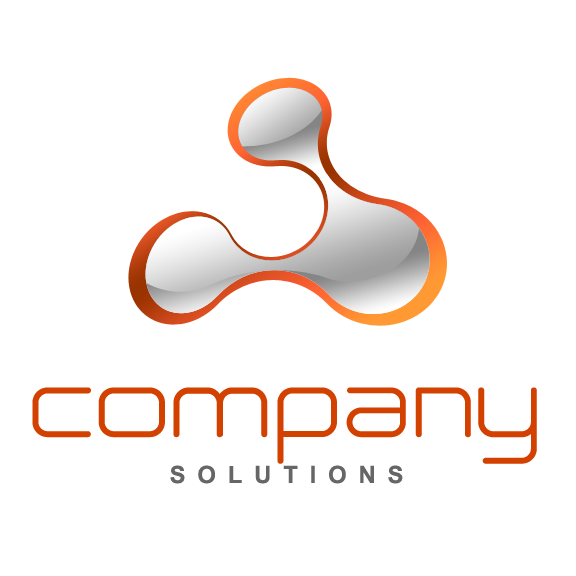
<style>
.page{position:relative;width:576px;height:576px;background:#ffffff}
.page>*{position:absolute;margin:0}
.t1{font:95.1px "Neogrey";letter-spacing:0.02em;color:#d34100}
.t2{font:23.8px "Arial-BoldMT";letter-spacing:0.5em;color:#666666}
</style>
<div class="page">
<p class="t1" style="left:32px;top:387px;width:505px;height:77px">company</p>
<p class="t2" style="left:170px;top:465px;width:233px;height:19px">SOLUTIONS</p>
</div>
